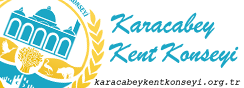
<style>
.page{position:relative;width:244px;height:88px;background:#ffffff}
.page>*{position:absolute;margin:0}
.t1{font:30px "BrushScriptMT";color:#1ba6c5}
.t2{font:9px "CourierNewPS-ItalicMT";color:#0f0f0f}
</style>
<div class="page">
<p class="t1" style="left:110px;top:12px;width:105px;height:27px">Karacabey</p>
<p class="t1" style="left:108px;top:42px;width:50px;height:21px">Kent</p>
<p class="t1" style="left:160px;top:42px;width:79px;height:26px">Konseyi</p>
<p class="t2" style="left:94px;top:78px;width:147px;height:9px">karacabeykentkonseyi.org.tr</p>
</div>
